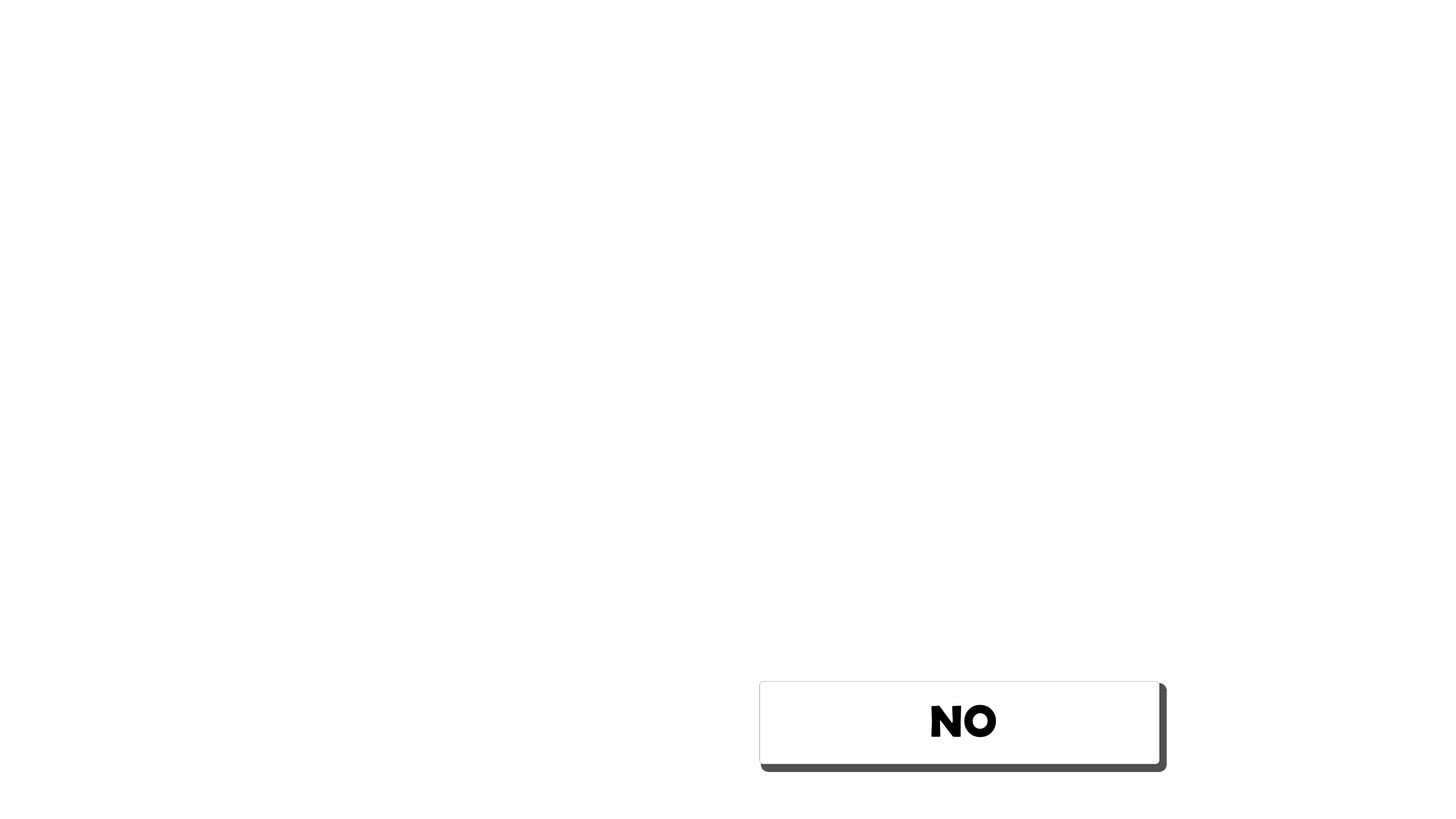
<style>
.page{position:relative;width:1456px;height:819px;background:#ffffff}
.page>*{position:absolute;margin:0}
.t1{font:45.5px "BerlinSansFBDemi-Bold";color:#000000}
</style>
<div class="page">
<p class="t1" style="left:931px;top:705px;width:65px;height:32px">NO</p>
</div>
